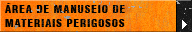
<style>
.page{position:relative;width:192px;height:32px}
.page>*{position:absolute;margin:0}
.t1{font:11px/14px "HelveticaLT-Condensed-Black";letter-spacing:0.08em;color:#000000}
</style>
<div class="page">
<p class="t1" style="left:5px;top:3px;width:120px;height:24px">ÁREA DE MANUSEIO DE<br>MATERIAIS PERIGOSOS</p>
</div>
